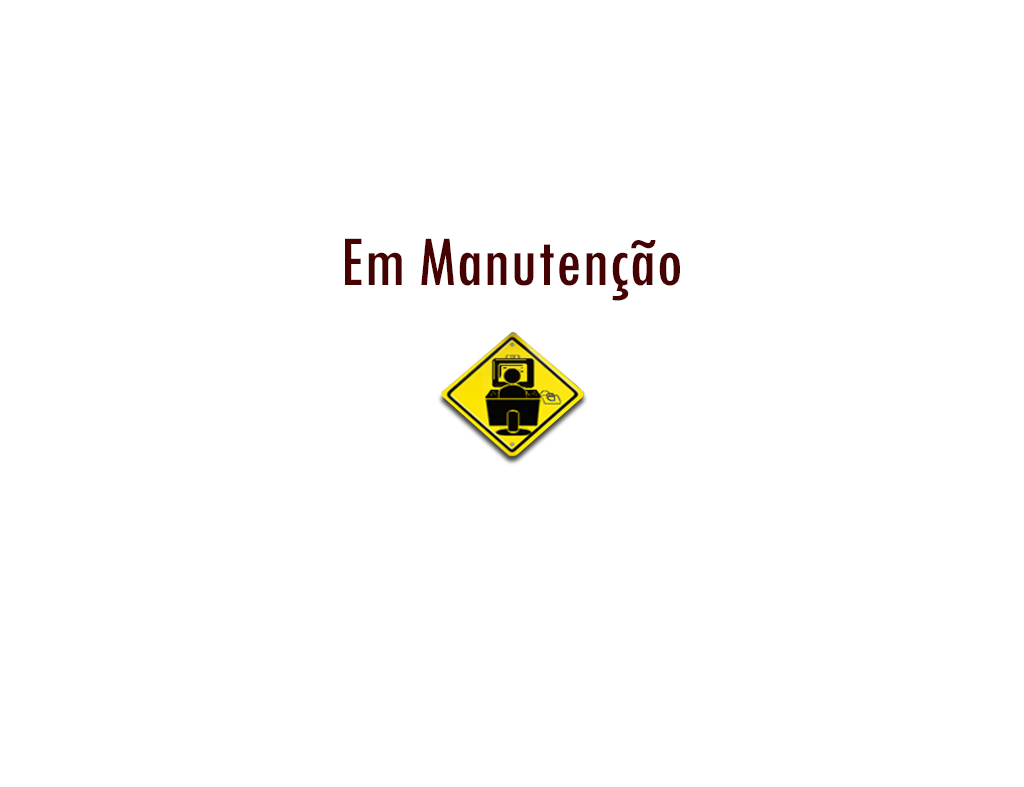
<style>
.page{position:relative;width:1024px;height:787px;background:#ffffff}
.page>*{position:absolute;margin:0}
.t1{font:74.1px "TwCenMT-Condensed";color:#460103}
</style>
<div class="page">
<p class="t1" style="left:345px;top:238px;width:335px;height:63px">Em Manutenção</p>
</div>
